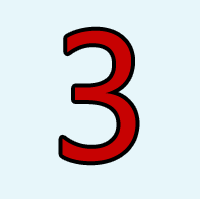
<style>
.page{position:relative;width:200px;height:200px;background:#e7f6fa}
.page>*{position:absolute;margin:0}
.t1{font:180px "MicrosoftPhagsPa";color:#c70202}
</style>
<div class="page">
<p class="t1" style="left:62px;top:30px;width:74px;height:132px">3</p>
</div>
